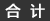
<style>
.page{position:relative;width:50px;height:21px;background:#333333}
.page>*{position:absolute;margin:0}
.t1{font:14.6px "MicrosoftYaHei";letter-spacing:0.68em;color:#ffffff;font-weight:bold}
</style>
<div class="page">
<p class="t1" style="left:5px;top:3px;width:40px;height:15px">合计</p>
</div>
